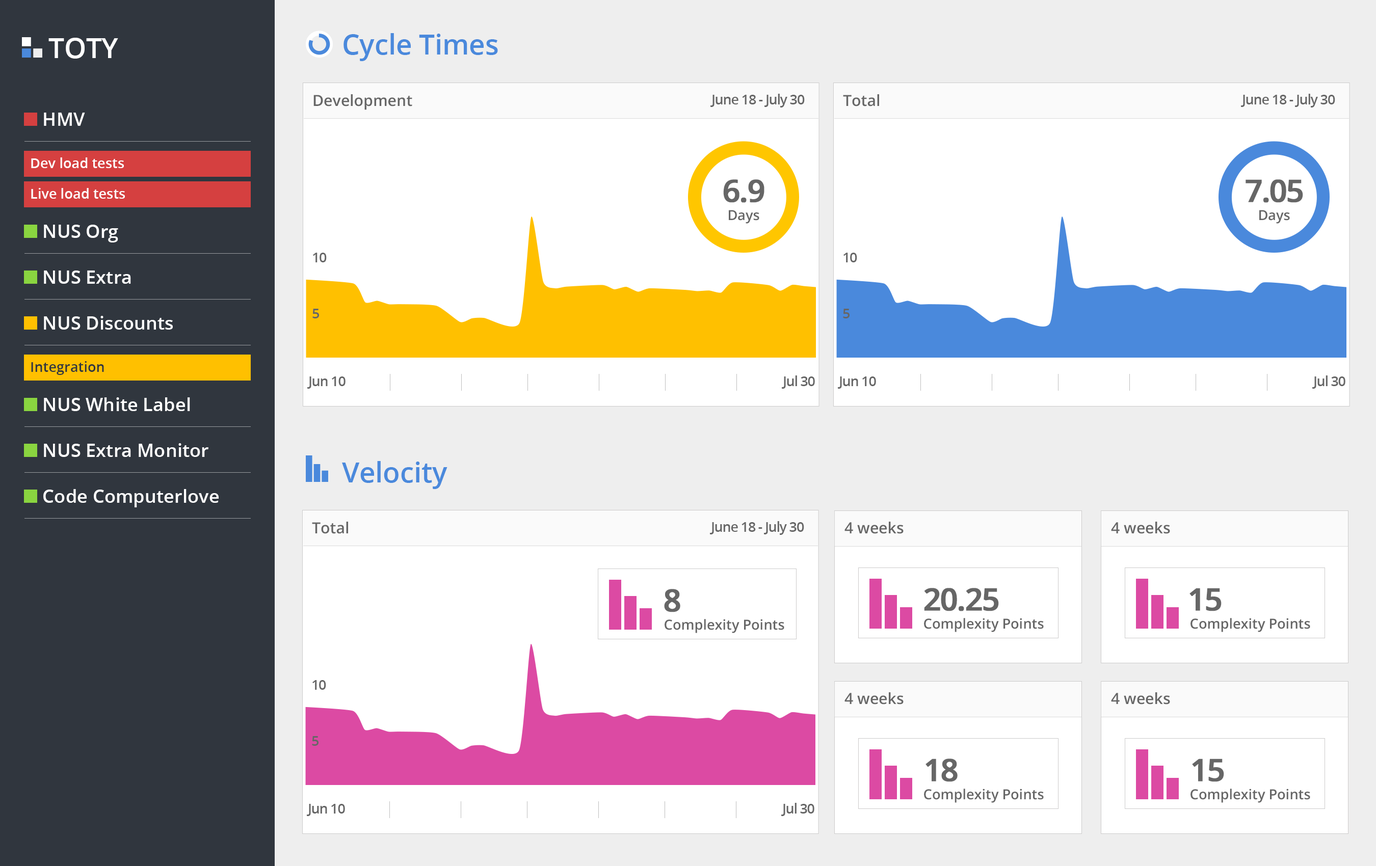
<style>
.page{position:relative;width:1376px;height:866px;background:#ffffff}
.page>*{position:absolute;margin:0}
.t1{font:27.8px "OpenSans-Semibold";color:#ffffff}
.t2{font:27.8px "OpenSans-Semibold";color:#4a89dc}
.t3{font:15.4px "OpenSans-Semibold";color:#666666}
.t4{font:13.9px "OpenSans-Semibold";letter-spacing:-0.05em;color:#666666}
.t5{font:18.5px "OpenSans-Semibold";color:#ffffff}
.t6{font:13.9px "OpenSans-Semibold";color:#ffffff}
.t7{font:30.9px "OpenSans-Semibold";letter-spacing:-0.05em;color:#666666;font-weight:bold}
.t8{font:13.9px "OpenSans-Semibold";color:#666666}
.t9{font:13.9px "OpenSans-Semibold";color:#30363e}
</style>
<div class="page">
<p class="t1" style="left:48px;top:38px;width:70px;height:21px">TOTY</p>
<p class="t2" style="left:344px;top:33px;width:154px;height:28px">Cycle Times</p>
<p class="t3" style="left:313px;top:94px;width:99px;height:16px">Development</p>
<p class="t4" style="left:711px;top:94px;width:94px;height:14px">June 18 - July 30</p>
<p class="t3" style="left:843px;top:94px;width:36px;height:13px">Total</p>
<p class="t4" style="left:1241px;top:94px;width:94px;height:14px">June 18 - July 30</p>
<p class="t5" style="left:44px;top:113px;width:41px;height:13px">HMV</p>
<p class="t6" style="left:31px;top:157px;width:93px;height:11px">Dev load tests</p>
<p class="t7" style="left:723px;top:179px;width:42px;height:24px">6.9</p>
<p class="t7" style="left:1246px;top:179px;width:57px;height:24px">7.05</p>
<p class="t6" style="left:31px;top:188px;width:94px;height:11px">Live load tests</p>
<p class="t8" style="left:729px;top:210px;width:30px;height:14px">Days</p>
<p class="t8" style="left:1259px;top:210px;width:31px;height:14px">Days</p>
<p class="t5" style="left:44px;top:225px;width:74px;height:18px">NUS Org</p>
<p class="t4" style="left:313px;top:253px;width:14px;height:9px">10</p>
<p class="t4" style="left:844px;top:253px;width:13px;height:9px">10</p>
<p class="t5" style="left:44px;top:271px;width:87px;height:13px">NUS Extra</p>
<p class="t5" style="left:44px;top:316px;width:129px;height:14px">NUS Discounts</p>
<p class="t4" style="left:312px;top:309px;width:7px;height:10px">5</p>
<p class="t4" style="left:843px;top:309px;width:7px;height:10px">5</p>
<p class="t9" style="left:31px;top:361px;width:73px;height:14px">Integration</p>
<p class="t4" style="left:307px;top:377px;width:39px;height:12px">Jun 10</p>
<p class="t4" style="left:782px;top:376px;width:33px;height:13px">Jul 30</p>
<p class="t4" style="left:838px;top:377px;width:38px;height:12px">Jun 10</p>
<p class="t4" style="left:1312px;top:376px;width:34px;height:13px">Jul 30</p>
<p class="t5" style="left:44px;top:398px;width:146px;height:13px">NUS White Label</p>
<p class="t5" style="left:44px;top:443px;width:164px;height:14px">NUS Extra Monitor</p>
<p class="t2" style="left:342px;top:461px;width:106px;height:28px">Velocity</p>
<p class="t5" style="left:43px;top:489px;width:176px;height:19px">Code Computerlove</p>
<p class="t3" style="left:312px;top:522px;width:36px;height:12px">Total</p>
<p class="t4" style="left:710px;top:521px;width:94px;height:14px">June 18 - July 30</p>
<p class="t3" style="left:845px;top:522px;width:59px;height:12px">4 weeks</p>
<p class="t3" style="left:1111px;top:522px;width:59px;height:12px">4 weeks</p>
<p class="t7" style="left:664px;top:589px;width:16px;height:24px">8</p>
<p class="t7" style="left:924px;top:588px;width:75px;height:24px">20.25</p>
<p class="t7" style="left:1190px;top:588px;width:32px;height:24px">15</p>
<p class="t8" style="left:665px;top:619px;width:119px;height:15px">Complexity Points</p>
<p class="t8" style="left:924px;top:618px;width:120px;height:15px">Complexity Points</p>
<p class="t8" style="left:1191px;top:618px;width:119px;height:15px">Complexity Points</p>
<p class="t4" style="left:312px;top:680px;width:14px;height:10px">10</p>
<p class="t3" style="left:845px;top:693px;width:59px;height:12px">4 weeks</p>
<p class="t3" style="left:1111px;top:693px;width:59px;height:12px">4 weeks</p>
<p class="t4" style="left:312px;top:737px;width:7px;height:9px">5</p>
<p class="t7" style="left:926px;top:759px;width:32px;height:23px">18</p>
<p class="t7" style="left:1192px;top:759px;width:32px;height:23px">15</p>
<p class="t8" style="left:924px;top:789px;width:120px;height:14px">Complexity Points</p>
<p class="t8" style="left:1191px;top:789px;width:119px;height:14px">Complexity Points</p>
<p class="t4" style="left:307px;top:804px;width:38px;height:13px">Jun 10</p>
<p class="t4" style="left:781px;top:803px;width:33px;height:14px">Jul 30</p>
</div>
